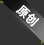
<style>
.page{position:relative;width:44px;height:45px;background:#333333}
.page>*{position:absolute;margin:0}
.t1{font:12px "SimHei";letter-spacing:-0.04em;color:#fdfdfe;font-weight:bold}
</style>
<div class="page">
<p class="t1" style="left:15px;top:5px;width:25px;height:22px;rotate:43deg">原创</p>
</div>
